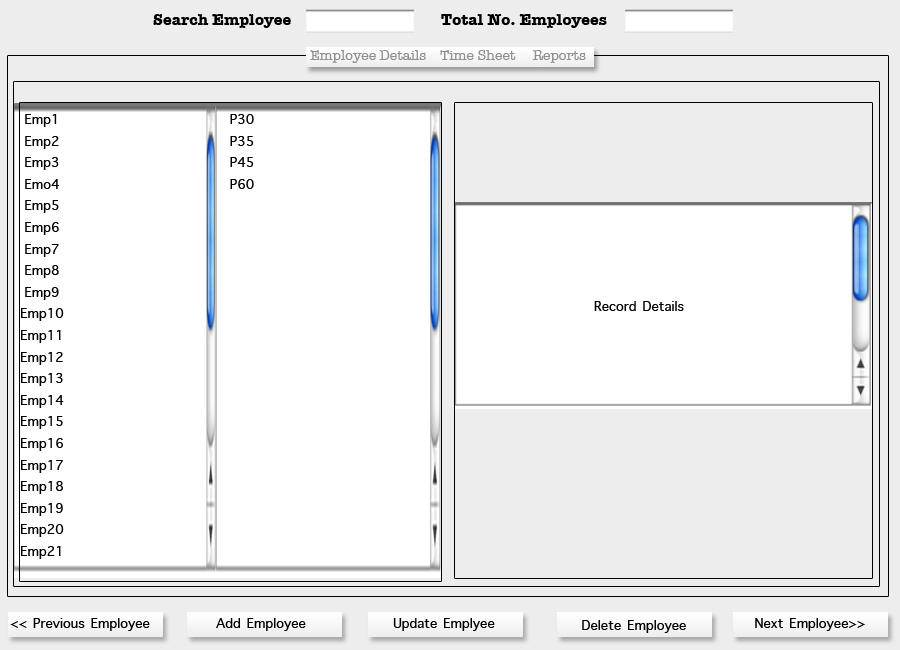
<style>
.page{position:relative;width:900px;height:650px;background:#ffffff}
.page>*{position:absolute;margin:0}
.t1{font:16px "AmericanTypewriter-Bold";color:#000000}
.t2{font:14px "AmericanTypewriter";color:#918e8e}
.t3{font:18px "AppleSymbols";color:#000000}
</style>
<div class="page">
<p class="t1" style="left:153px;top:14px;width:454px;height:14px">Search Employee     Total No. Employees</p>
<p class="t2" style="left:310px;top:50px;width:276px;height:13px">Employee Details    Time Sheet     Reports</p>
<p class="t3" style="left:21px;top:114px;width:43px;height:445px;text-align:center">Emp1<br>Emp2<br>Emp3<br>Emo4<br>Emp5<br>Emp6<br>Emp7<br>Emp8<br>Emp9<br>Emp10<br>Emp11<br>Emp12<br>Emp13<br>Emp14<br>Emp15<br>Emp16<br>Emp17<br>Emp18<br>Emp19<br>Emp20<br>Emp21</p>
<p class="t3" style="left:230px;top:114px;width:24px;height:75px;text-align:center">P30<br>P35<br>P45<br>P60</p>
<p class="t3" style="left:594px;top:301px;width:90px;height:10px">Record Details</p>
<p class="t3" style="left:10px;top:618px;width:140px;height:13px">&lt;&lt; Previous Employee</p>
<p class="t3" style="left:216px;top:618px;width:90px;height:13px">Add Employee</p>
<p class="t3" style="left:393px;top:618px;width:102px;height:13px">Update Emplyee</p>
<p class="t3" style="left:582px;top:620px;width:104px;height:13px">Delete Employee</p>
<p class="t3" style="left:755px;top:618px;width:110px;height:13px">Next Employee&gt;&gt;</p>
</div>
